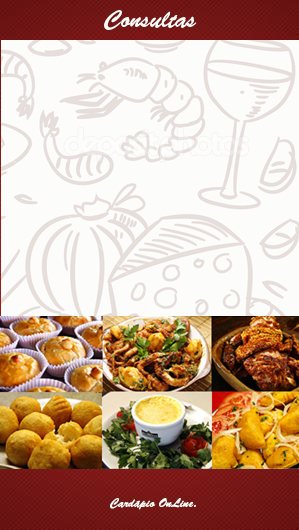
<style>
.page{position:relative;width:299px;height:530px}
.page>*{position:absolute;margin:0}
.t1{font:24px "BrushScriptStd";color:#f8fcf8}
.t2{font:12px "BrushScriptStd";color:#f8fcf8}
</style>
<div class="page">
<p class="t1" style="left:104px;top:10px;width:93px;height:20px">Consultas</p>
<p class="t2" style="left:110px;top:498px;width:86px;height:12px">Cardápio OnLine.</p>
</div>
